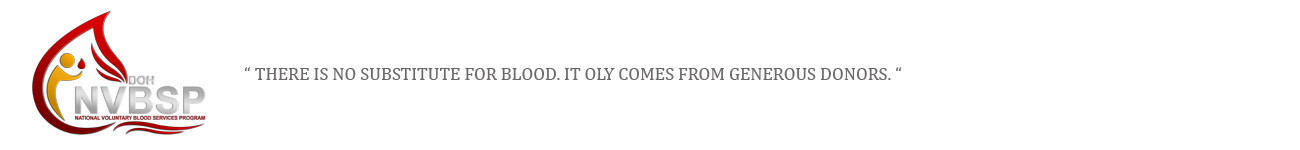
<style>
.page{position:relative;width:1300px;height:150px;background:#ffffff}
.page>*{position:absolute;margin:0}
.t1{font:18px "Cambria";color:#6a6868}
</style>
<div class="page">
<p class="t1" style="left:244px;top:67px;width:658px;height:13px">“ THERE IS NO SUBSTITUTE FOR BLOOD. IT OLY COMES FROM GENEROUS DONORS. “</p>
</div>
